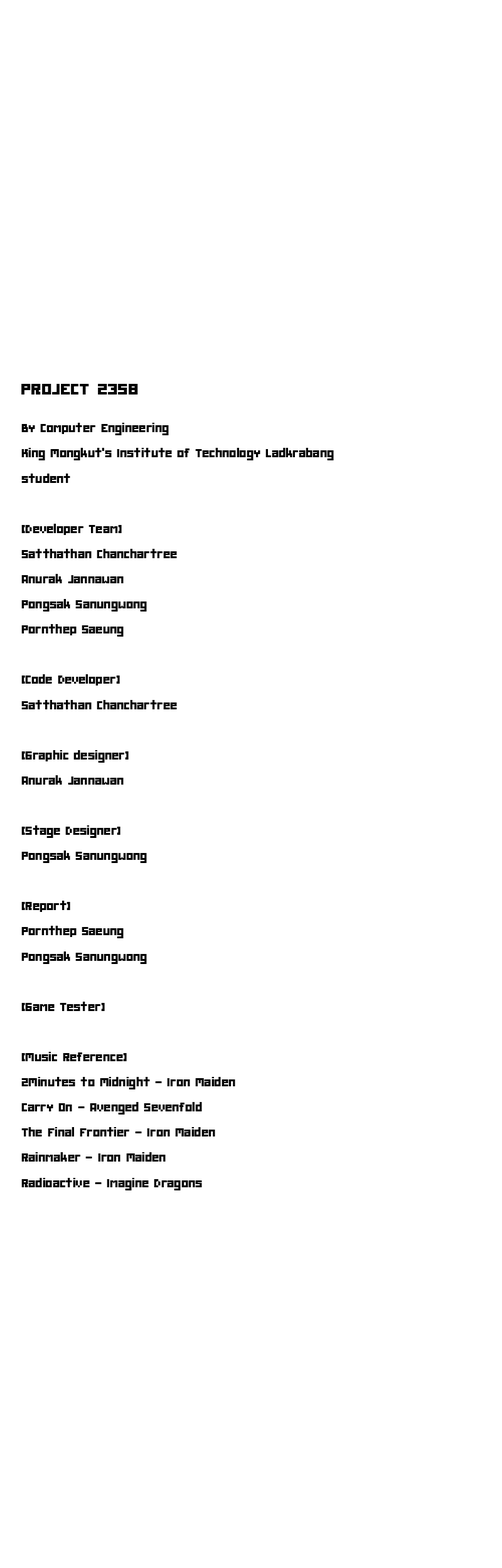
<style>
.page{position:relative;width:502px;height:1568px;background:#ffffff}
.page>*{position:absolute;margin:0}
.t1{font:27.6px "2005_iannnnnCPU";color:#000000;scale:1.09 1}
.t2{font:21px "2005_iannnnnCPU";color:#000000}
</style>
<div class="page">
<p class="t1" style="left:21px;top:384px;width:117px;height:11px">PROJECT 2358</p>
<p class="t2" style="left:21px;top:423px;width:313px;height:767px;text-align:right">By Computer Engineering<br>King Mongkut's Institute of Technology Ladkrabang<br>student<br><br>[Developer Team]<br>  Satthathan Chanchartree<br>  Anurak Jannawan<br>  Pongsak Sanungwong<br>  Pornthep Saeung<br><br>[Code Developer]<br>  Satthathan Chanchartree<br><br>[Graphic designer]<br>  Anurak Jannawan<br><br>[Stage Designer]<br>  Pongsak Sanungwong<br><br>[Report]<br>  Pornthep Saeung<br>  Pongsak Sanungwong<br><br>[Game Tester]<br><br>[Music Reference]<br>  2Minutes to Midnight - Iron Maiden<br>  Carry On - Avenged Sevenfold<br>  The Final Frontier - Iron Maiden<br>  Rainmaker - Iron Maiden<br>  Radioactive - Imagine Dragons</p>
</div>
